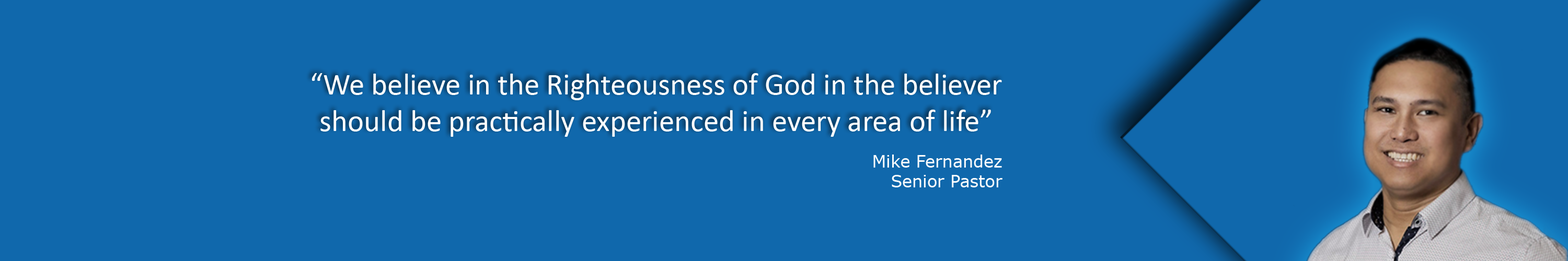
<style>
.page{position:relative;width:1568px;height:261px;background:#1068ac}
.page>*{position:absolute;margin:0}
.t1{font:30.7px "Calibri";color:#fefefe}
.t2{font:16.6px "Verdana";color:#fefefe}
</style>
<div class="page">
<p class="t1" style="left:312px;top:73px;width:690px;height:64px;text-align:center">“We believe in the Righteousness of God in the believer<br>should be practically experienced in every area of life”</p>
<p class="t2" style="left:873px;top:155px;width:129px;height:33px;text-align:right">Mike Fernandez<br>Senior Pastor</p>
</div>
